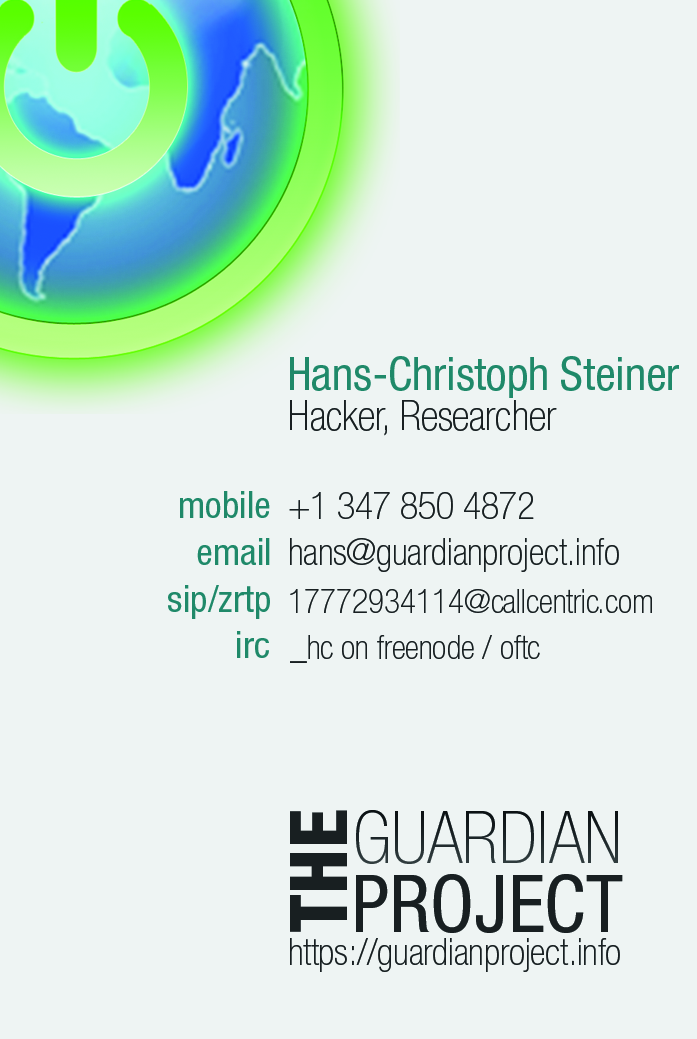
<style>
.page{position:relative;width:697px;height:1039px;background:#eef4f3}
.page>*{position:absolute;margin:0}
.t1{font:45.8px "HelveticaNeueLTStd-Cn";color:#1f8969}
.t2{font:41.7px "HelveticaNeueLTStd-ThCn";color:#181f21}
.t3{font:37.5px "HelveticaNeueLTStd-Cn";color:#1f8969}
.t4{font:37.5px "HelveticaNeueLTStd-ThCn";color:#181f21}
.t5{font:33.3px "HelveticaNeueLTStd-ThCn";color:#181f21}
.t6{font:79.2px "HelveticaNeueLTStd-HvCn";color:#181f21}
.t7{font:72.9px "HelveticaNeueLTStd-ThCn";color:#181f21}
.t8{font:79.2px "HelveticaNeueLTStd-Cn";color:#181f21}
</style>
<div class="page">
<p class="t1" style="left:290px;top:356px;width:389px;height:42px">Hans-Christoph Steiner</p>
<p class="t2" style="left:290px;top:400px;width:267px;height:36px">Hacker, Researcher</p>
<p class="t3" style="left:180px;top:491px;width:90px;height:27px">mobile</p>
<p class="t4" style="left:289px;top:492px;width:245px;height:27px">+1 347 850 4872</p>
<p class="t3" style="left:197px;top:538px;width:73px;height:27px">email</p>
<p class="t4" style="left:290px;top:538px;width:329px;height:34px">hans@guardianproject.info</p>
<p class="t3" style="left:168px;top:585px;width:102px;height:34px">sip/zrtp</p>
<p class="t5" style="left:290px;top:589px;width:362px;height:24px">17772934114@callcentric.com</p>
<p class="t3" style="left:237px;top:631px;width:32px;height:27px">irc</p>
<p class="t5" style="left:290px;top:635px;width:250px;height:28px">_hc on freenode / oftc</p>
<p class="t6" style="left:290px;top:810px;width:57px;height:122px;rotate:-90deg">THE</p>
<p class="t7" style="left:356px;top:810px;width:262px;height:54px">GUARDIAN</p>
<p class="t8" style="left:356px;top:874px;width:267px;height:59px">PROJECT</p>
<p class="t4" style="left:290px;top:938px;width:330px;height:34px">https://guardianproject.info</p>
</div>
